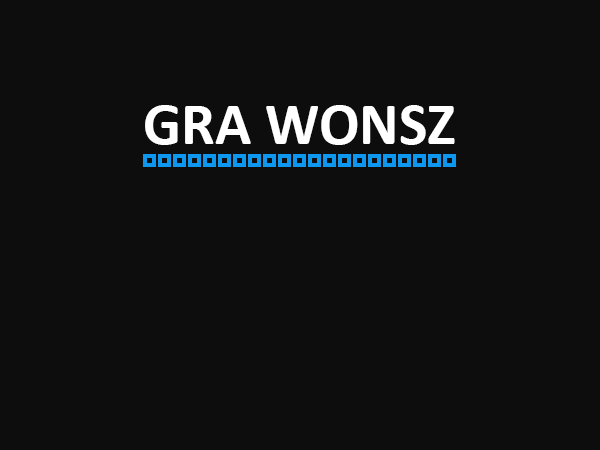
<style>
.page{position:relative;width:600px;height:450px;background:#0d0d0d}
.page>*{position:absolute;margin:0}
.t1{font:60px "Calibri-Bold";color:#ffffff}
</style>
<div class="page">
<p class="t1" style="left:145px;top:105px;width:310px;height:40px">GRA WONSZ</p>
</div>
